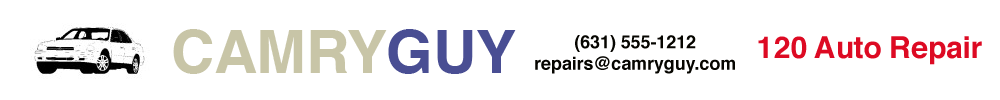
<style>
.page{position:relative;width:1000px;height:100px;background:#ffffff}
.page>*{position:absolute;margin:0}
.t1{font:60px "Helvetica-Bold";letter-spacing:-0.005em;color:#c8c5a7}
.t2{font:60px "Helvetica-Bold";letter-spacing:-0.005em;color:#494e93}
.t3{font:18px "Helvetica-Bold";letter-spacing:-0.005em;color:#060500}
.t4{font:30px "Helvetica-Bold";letter-spacing:-0.005em;color:#dd0a23}
</style>
<div class="page">
<p class="t1" style="left:173px;top:29px;width:343px;height:45px">CAMRY<span class="t2">GUY</span></p>
<p class="t3" style="left:535px;top:35px;width:200px;height:39px;text-align:center">(631) 555-1212<br>repairs@camryguy.com</p>
<p class="t4" style="left:758px;top:36px;width:224px;height:29px">120 Auto Repair</p>
</div>
